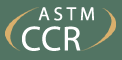
<style>
.page{position:relative;width:122px;height:60px;background:#527463}
.page>*{position:absolute;margin:0}
.t1{font:18.9px "Myriad-Roman";letter-spacing:0.2em;color:#ffffff}
.t2{font:35px "Myriad-Roman";letter-spacing:0.025em;color:#ffffff}
</style>
<div class="page">
<p class="t1" style="left:38px;top:7px;width:56px;height:14px">ASTM</p>
<p class="t2" style="left:22px;top:26px;width:59px;height:25px">CCR</p>
</div>
